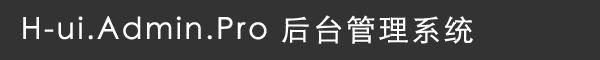
<style>
.page{position:relative;width:600px;height:60px;background:#333333}
.page>*{position:absolute;margin:0}
.t1{font:30px "STXihei";letter-spacing:0.06em;color:#ffffff;font-weight:bold}
</style>
<div class="page">
<p class="t1" style="left:23px;top:15px;width:450px;height:29px">H-ui.Admin.Pro 后台管理系统</p>
</div>
